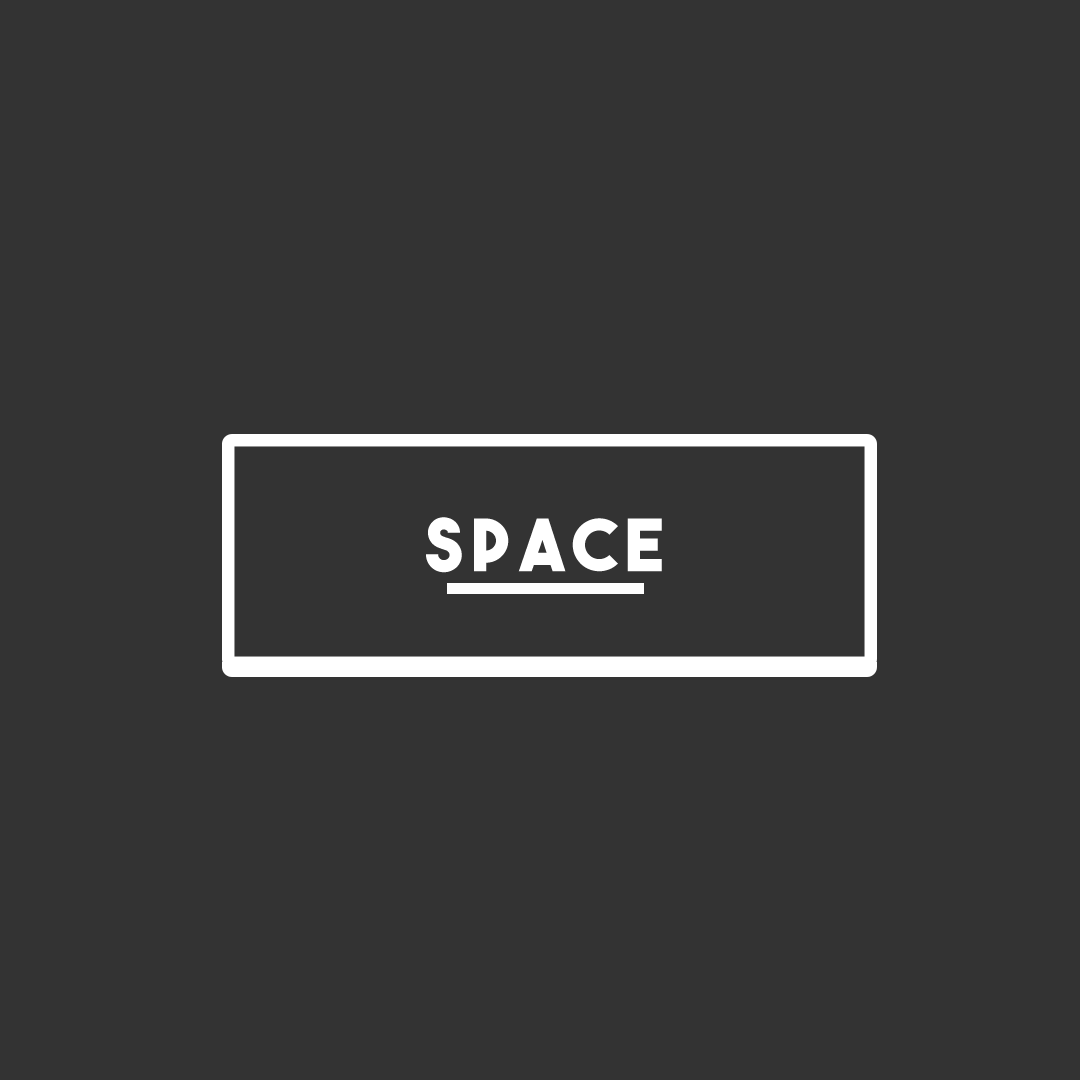
<style>
.page{position:relative;width:1080px;height:1080px;background:#333333}
.page>*{position:absolute;margin:0}
.t1{font:72px "TheBoldFont";letter-spacing:0.1em;color:#ffffff}
</style>
<div class="page">
<p class="t1" style="left:426px;top:517px;width:236px;height:56px">Space</p>
</div>
